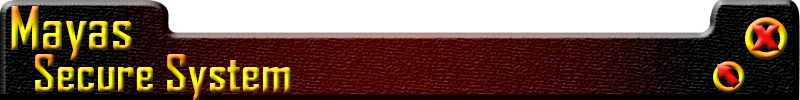
<style>
.page{position:relative;width:800px;height:100px;background:#ffffff}
.page>*{position:absolute;margin:0}
.t1{font:58.3px "AgencyFB-Bold"}
.t2{font:50px "AgencyFB-Bold"}
</style>
<div class="page">
<p class="t1" style="left:11px;top:6px;width:121px;height:54px">Mayas</p>
<p class="t2" style="left:35px;top:54px;width:256px;height:47px">Secure System</p>
</div>
